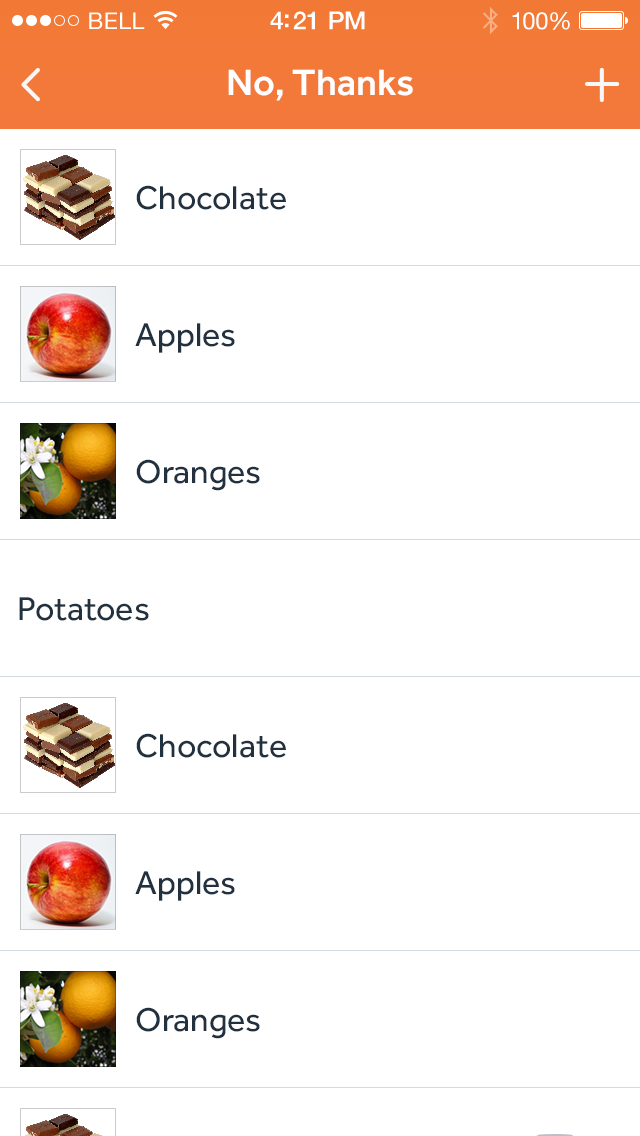
<style>
.page{position:relative;width:640px;height:1136px;background:#ffffff}
.page>*{position:absolute;margin:0}
.t1{font:23px "HelveticaNeue";letter-spacing:0.02em;color:#ffffff}
.t2{font:25px "HelveticaNeue-Medium";letter-spacing:-0.02em;color:#ffffff}
.t3{font:24px "HelveticaNeue";letter-spacing:-0.02em;color:#ffffff}
.t4{font:38px "Effra-Medium";color:#ffffff}
.t5{font:34px "Effra-Regular";color:#22313f}
</style>
<div class="page">
<p class="t1" style="left:89px;top:12px;width:56px;height:17px">BELL</p>
<p class="t2" style="left:270px;top:11px;width:95px;height:19px">4:21 PM</p>
<p class="t3" style="left:512px;top:12px;width:58px;height:18px">100%</p>
<p class="t4" style="left:228px;top:69px;width:185px;height:32px">No, Thanks</p>
<p class="t5" style="left:136px;top:185px;width:150px;height:25px">Chocolate</p>
<p class="t5" style="left:135px;top:323px;width:100px;height:30px">Apples</p>
<p class="t5" style="left:136px;top:459px;width:124px;height:32px">Oranges</p>
<p class="t5" style="left:19px;top:597px;width:130px;height:24px">Potatoes</p>
<p class="t5" style="left:136px;top:733px;width:150px;height:25px">Chocolate</p>
<p class="t5" style="left:135px;top:871px;width:100px;height:30px">Apples</p>
<p class="t5" style="left:136px;top:1007px;width:124px;height:32px">Oranges</p>
</div>
